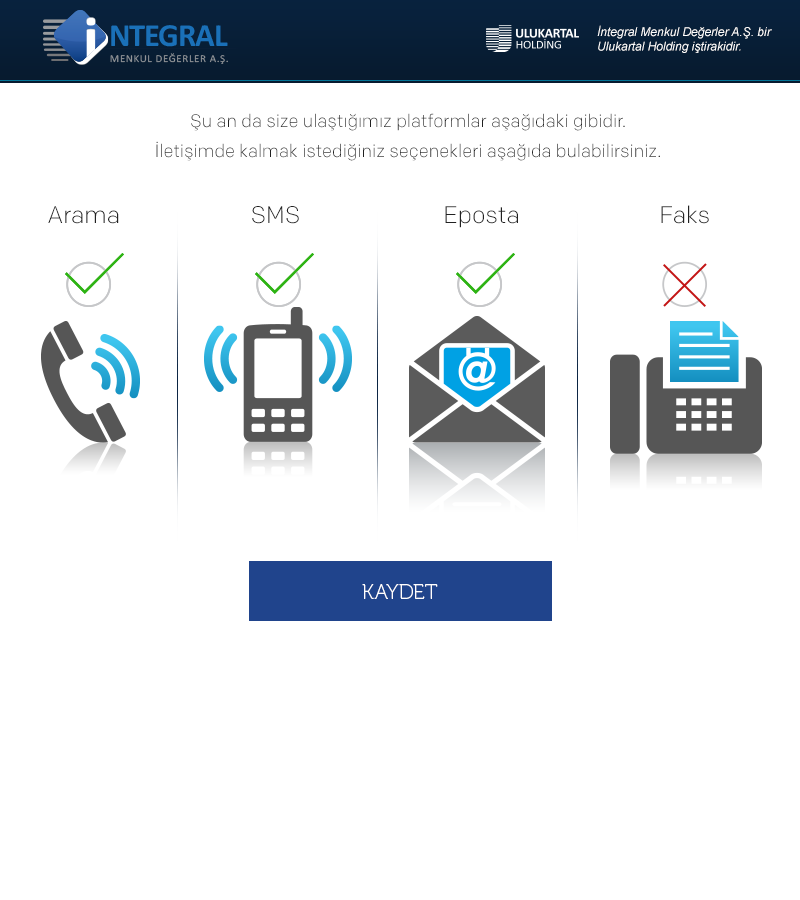
<style>
.page{position:relative;width:800px;height:900px;background:#ffffff}
.page>*{position:absolute;margin:0}
.t1{font:12px "Arial-ItalicMT";color:#ffffff}
.t2{font:18px/30px "Colfax-Light";color:#212121}
.t3{font:24px "Colfax-Light";color:#212121}
.t4{font:21px "Museo100-Regular";color:#ffffff}
</style>
<div class="page">
<p class="t1" style="left:597px;top:25px;width:175px;height:28px">İntegral Menkul Değerler A.Ş. bir<br>Ulukartal Holding iştirakidir.</p>
<p class="t2" style="left:156px;top:113px;width:504px;height:48px;text-align:center">Şu an da size ulaştığımız platformlar aşağıdaki gibidir.<br>İletişimde kalmak istediğiniz seçenekleri aşağıda bulabilirsiniz.</p>
<p class="t3" style="left:48px;top:205px;width:661px;height:23px">Arama       SMS    Eposta    Faks</p>
<p class="t4" style="left:362px;top:584px;width:76px;height:15px">KAYDET</p>
</div>
